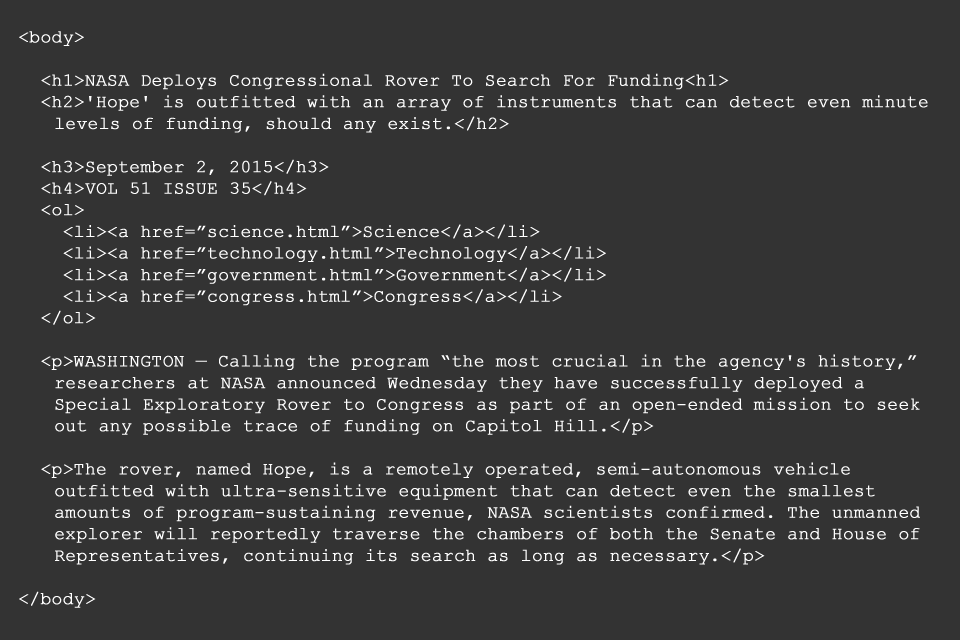
<style>
.page{position:relative;width:960px;height:640px;background:#333333}
.page>*{position:absolute;margin:0}
.t1{font:18px "CourierNewPSMT";letter-spacing:-0.01em;color:#ffffff;font-weight:bold}
</style>
<div class="page">
<p class="t1" style="left:19px;top:31px;width:909px;height:577px">&lt;body&gt;<br><br>  &lt;h1&gt;NASA Deploys Congressional Rover To Search For Funding&lt;h1&gt;<br>  &lt;h2&gt;'Hope' is outfitted with an array of instruments that can detect even minute   levels of funding, should any exist.&lt;/h2&gt;<br><br>  &lt;h3&gt;September 2, 2015&lt;/h3&gt;<br>  &lt;h4&gt;VOL 51 ISSUE 35&lt;/h4&gt;<br>  &lt;ol&gt;<br>    &lt;li&gt;&lt;a href=”science.html”&gt;Science&lt;/a&gt;&lt;/li&gt;<br>    &lt;li&gt;&lt;a href=”technology.html”&gt;Technology&lt;/a&gt;&lt;/li&gt;<br>    &lt;li&gt;&lt;a href=”government.html”&gt;Government&lt;/a&gt;&lt;/li&gt;<br>    &lt;li&gt;&lt;a href=”congress.html”&gt;Congress&lt;/a&gt;&lt;/li&gt;<br>  &lt;/ol&gt;<br><br>  &lt;p&gt;WASHINGTON — Calling the program “the most crucial in the agency's history,”   researchers at NASA announced Wednesday they have successfully deployed a     Special Exploratory Rover to Congress as part of an open-ended mission to seek   out any possible trace of funding on Capitol Hill.&lt;/p&gt;<br><br>  &lt;p&gt;The rover, named Hope, is a remotely operated, semi-autonomous vehicle     outfitted with ultra-sensitive equipment that can detect even the smallest    amounts of program-sustaining revenue, NASA scientists confirmed. The unmanned   explorer will reportedly traverse the chambers of both the Senate and House of   Representatives, continuing its search as long as necessary.&lt;/p&gt;<br><br>&lt;/body&gt;</p>
</div>
